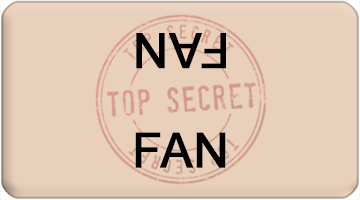
<style>
.page{position:relative;width:360px;height:200px;background:#e8d0bb}
.page>*{position:absolute;margin:0}
.t1{font:48px "ArialMT";color:#000000;font-weight:bold}
</style>
<div class="page">
<p class="t1" style="left:136px;top:33px;width:90px;height:36px;rotate:180deg">FAN</p>
<p class="t1" style="left:135px;top:132px;width:91px;height:36px">FAN</p>
</div>
